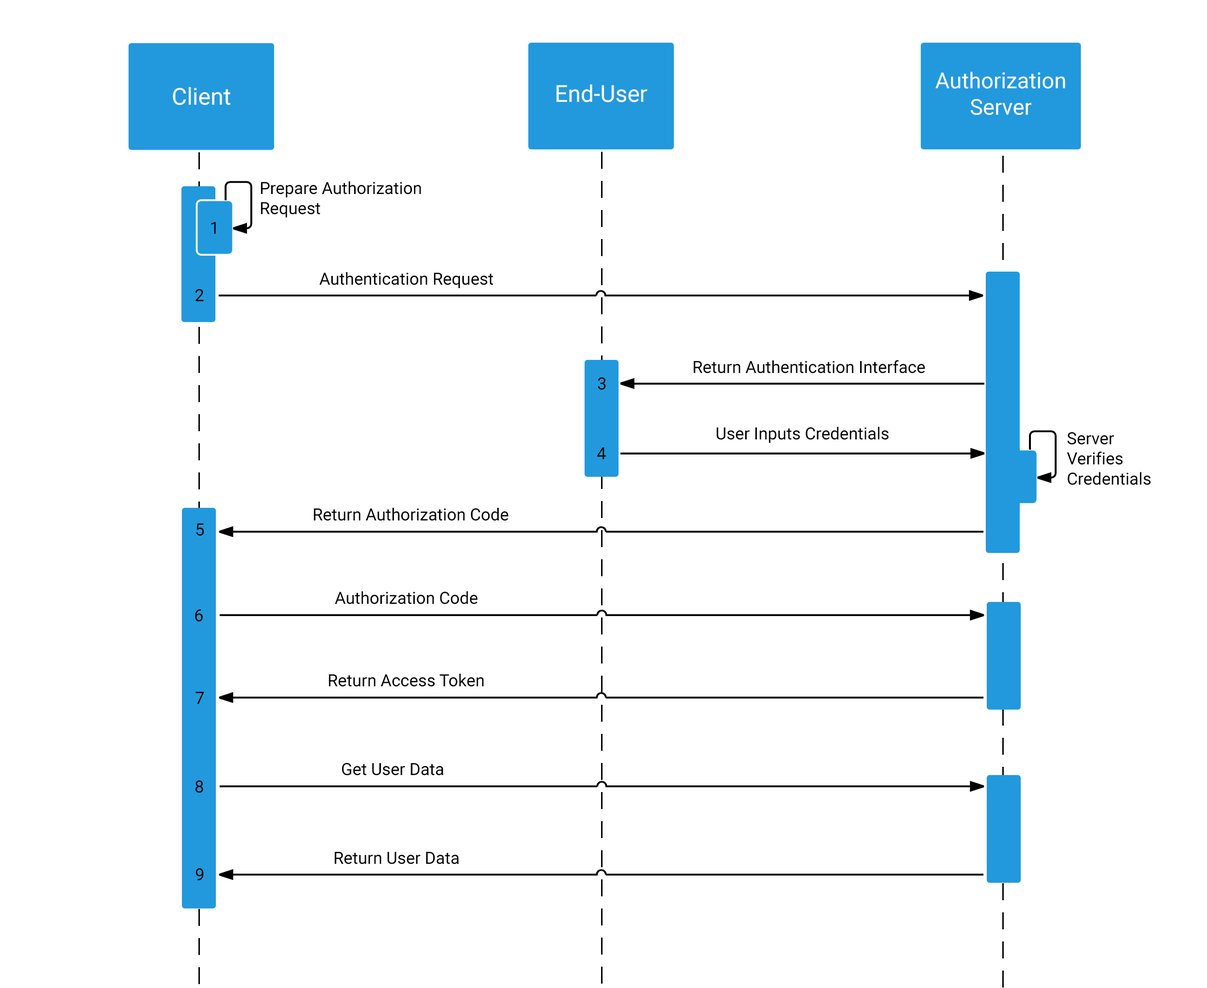
<style>
.page{position:relative;width:1207px;height:988px;background:#ffffff}
.page>*{position:absolute;margin:0}
.t1{font:22px "Roboto-Regular";color:#fefefe}
.t2{font:23.3px "Roboto-Regular";color:#fefefe}
.t3{font:16.8px "Roboto-Regular";color:#000000}
</style>
<div class="page">
<p class="t1" style="left:935px;top:72px;width:130px;height:43px;text-align:center">Authorization Server</p>
<p class="t2" style="left:173px;top:87px;width:57px;height:18px">Client</p>
<p class="t2" style="left:556px;top:84px;width:91px;height:18px">End-User</p>
<p class="t3" style="left:261px;top:181px;width:160px;height:37px">Prepare Authorization <br>Request</p>
<p class="t3" style="left:211px;top:222px;width:5px;height:12px">1</p>
<p class="t3" style="left:319px;top:272px;width:174px;height:16px">Authentication Request</p>
<p class="t3" style="left:195px;top:289px;width:9px;height:12px">2</p>
<p class="t3" style="left:694px;top:360px;width:231px;height:13px">Return Authentication Interface</p>
<p class="t3" style="left:598px;top:377px;width:8px;height:13px">3</p>
<p class="t3" style="left:716px;top:427px;width:173px;height:16px">User Inputs Credentials</p>
<p class="t3" style="left:1067px;top:432px;width:84px;height:53px">Server<br>Verifies <br>Credentials</p>
<p class="t3" style="left:597px;top:447px;width:9px;height:12px">4</p>
<p class="t3" style="left:314px;top:508px;width:194px;height:13px">Return Authorization Code</p>
<p class="t3" style="left:196px;top:523px;width:8px;height:13px">5</p>
<p class="t3" style="left:335px;top:591px;width:143px;height:13px">Authorization Code</p>
<p class="t3" style="left:195px;top:609px;width:8px;height:13px">6</p>
<p class="t3" style="left:329px;top:674px;width:155px;height:13px">Return Access Token</p>
<p class="t3" style="left:195px;top:692px;width:9px;height:12px">7</p>
<p class="t3" style="left:342px;top:763px;width:101px;height:13px">Get User Data</p>
<p class="t3" style="left:195px;top:780px;width:8px;height:13px">8</p>
<p class="t3" style="left:335px;top:852px;width:124px;height:12px">Return User Data</p>
<p class="t3" style="left:195px;top:868px;width:9px;height:12px">9</p>
</div>
